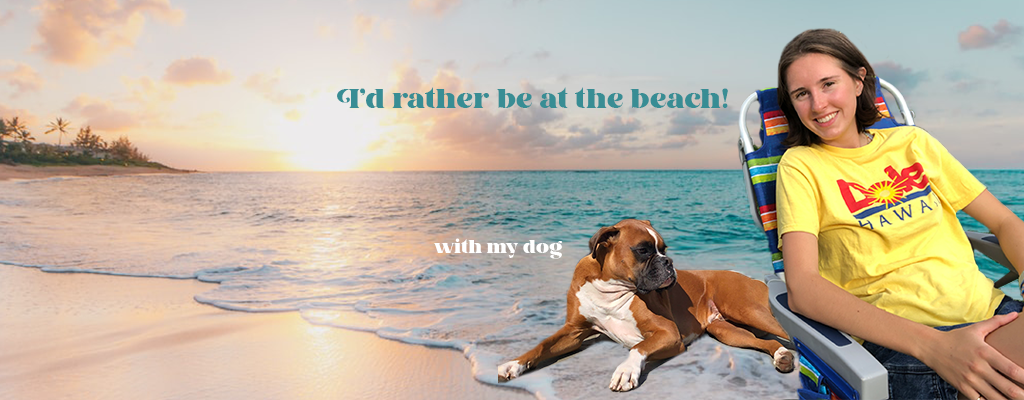
<style>
.page{position:relative;width:1024px;height:400px}
.page>*{position:absolute;margin:0}
.t1{font:27.1px "KaolyDemo-Regular";color:#388d94}
.t2{font:18px "KaolyDemo-Regular";color:#ffffff}
</style>
<div class="page">
<p class="t1" style="left:337px;top:87px;width:391px;height:21px">I’d rather be at the beach!</p>
<p class="t2" style="left:433px;top:238px;width:129px;height:21px">with my dog</p>
</div>
